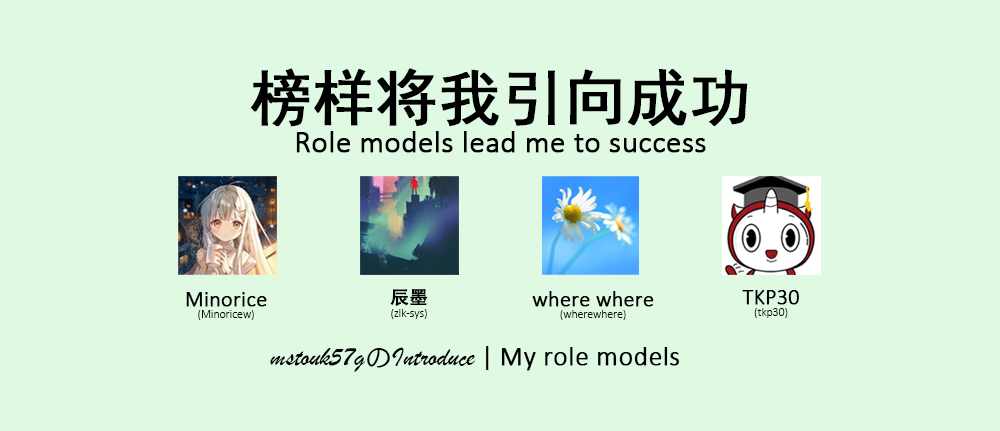
<style>
.page{position:relative;width:1000px;height:431px;background:#e0f9e3}
.page>*{position:absolute;margin:0}
.t1{font:30.6px/61.1px "Calibri-Light";color:#000000;font-weight:bold}
.t2{font:61.1px/61.1px "SimHei";color:#000000;font-weight:bold}
.t3{font:11.7px/20px "Calibri-Light";color:#000000}
.t4{font:21.7px/20px "Calibri-Light";color:#000000;font-weight:bold}
.t5{font:18.7px/20px "AdobeHeitiStd-Regular";color:#000000;font-weight:bold}
.t6{font:27.3px "STXingkai";color:#000000}
.t7{font:27.3px "Calibri";color:#000000}
.t8{font:27.3px "Calibri-Light";color:#000000;font-weight:bold}
</style>
<div class="page">
<p class="t1" style="left:251px;top:68px;width:497px;height:85px;text-align:center"><span class="t2">榜样将我引向成功<br></span>Role models lead me to success</p>
<p class="t3" style="left:186px;top:292px;width:81px;height:28px;text-align:center"><span class="t4">Minorice<br></span>(Minoricew)</p>
<p class="t3" style="left:390px;top:289px;width:37px;height:30px;text-align:center"><span class="t5">辰墨<br></span>(zlk-sys)</p>
<p class="t3" style="left:532px;top:291px;width:122px;height:29px;text-align:center"><span class="t4">where where<br></span>(wherewhere)</p>
<p class="t3" style="left:742px;top:290px;width:57px;height:28px;text-align:center"><span class="t4">TKP30<br></span>(tkp30)</p>
<p class="t6" style="left:270px;top:346px;width:409px;height:26px">mstouk57gのIntroduce<span class="t7"> | </span><span class="t8">My role models</span></p>
</div>
